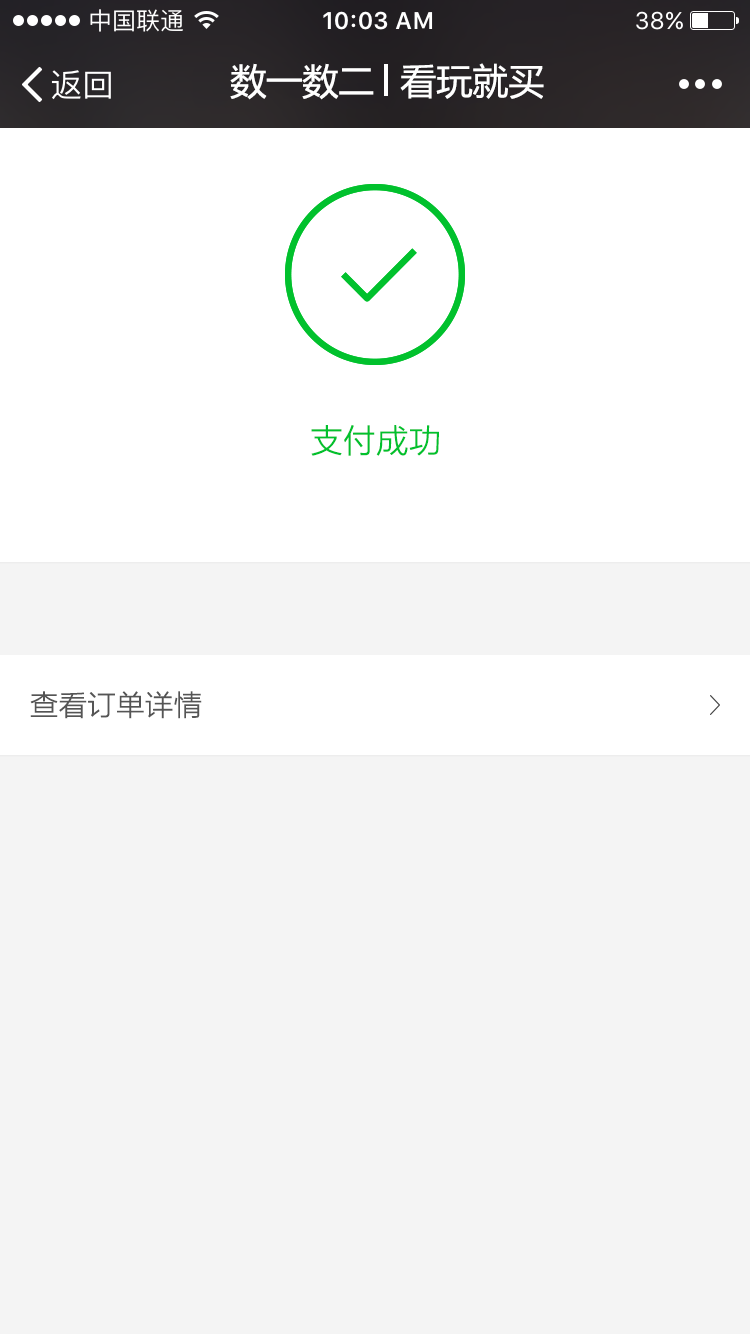
<style>
.page{position:relative;width:750px;height:1334px;background:#f4f4f4}
.page>*{position:absolute;margin:0}
.t1{font:36px "MicrosoftYaHei";color:#ffffff}
.t2{font:32px "MicrosoftYaHeiLight";color:#01c12d;font-weight:bold}
.t3{font:28px "MicrosoftYaHeiLight";color:#555555;font-weight:bold}
</style>
<div class="page">
<p class="t1" style="left:230px;top:63px;width:144px;height:37px">数一数二</p>
<p class="t1" style="left:400px;top:63px;width:144px;height:36px">看玩就买</p>
<p class="t2" style="left:311px;top:425px;width:128px;height:31px">支付成功</p>
<p class="t3" style="left:30px;top:691px;width:172px;height:28px">查看订单详情</p>
</div>
